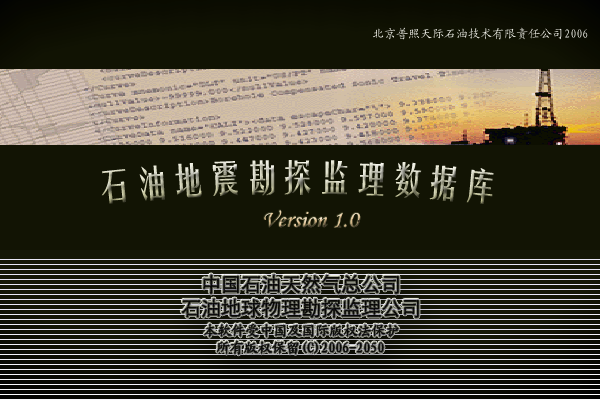
<style>
.page{position:relative;width:600px;height:400px;background:#121404}
.page>*{position:absolute;margin:0}
.t1{font:12px "KaiTi_GB2312";color:#f6f6ef}
.t2{font:36px "FZYTK--GBK1-0"}
.t3{font:24px "MonotypeCorsiva"}
.t4{font:24px "ArialMT"}
.t5{font:14px "KaiTi_GB2312";color:#070707}
.t6{font:20px "FZYTK--GBK1-0";color:#070707}
.t7{font:20px "STXihei";color:#070707}
</style>
<div class="page">
<p class="t1" style="left:373px;top:27px;width:215px;height:13px">北京普照天际石油技术有限责任公司2006</p>
<p class="t2" style="left:101px;top:160px;width:393px;height:44px">石油地震勘探监理数据库</p>
<p class="t3" style="left:264px;top:210px;width:97px;height:18px"><span class="t4">版本号</span>Version 1.0</p>
<p class="t5" style="left:182px;top:274px;width:237px;height:81px"><span class="t6">   </span><span class="t7"> 中国石油天然气总公司<br>石油地球物理勘探监理公司<br>   </span>本软件受中国及国际版权法保护<br>     所有版权保留(C)2006-2050</p>
</div>
